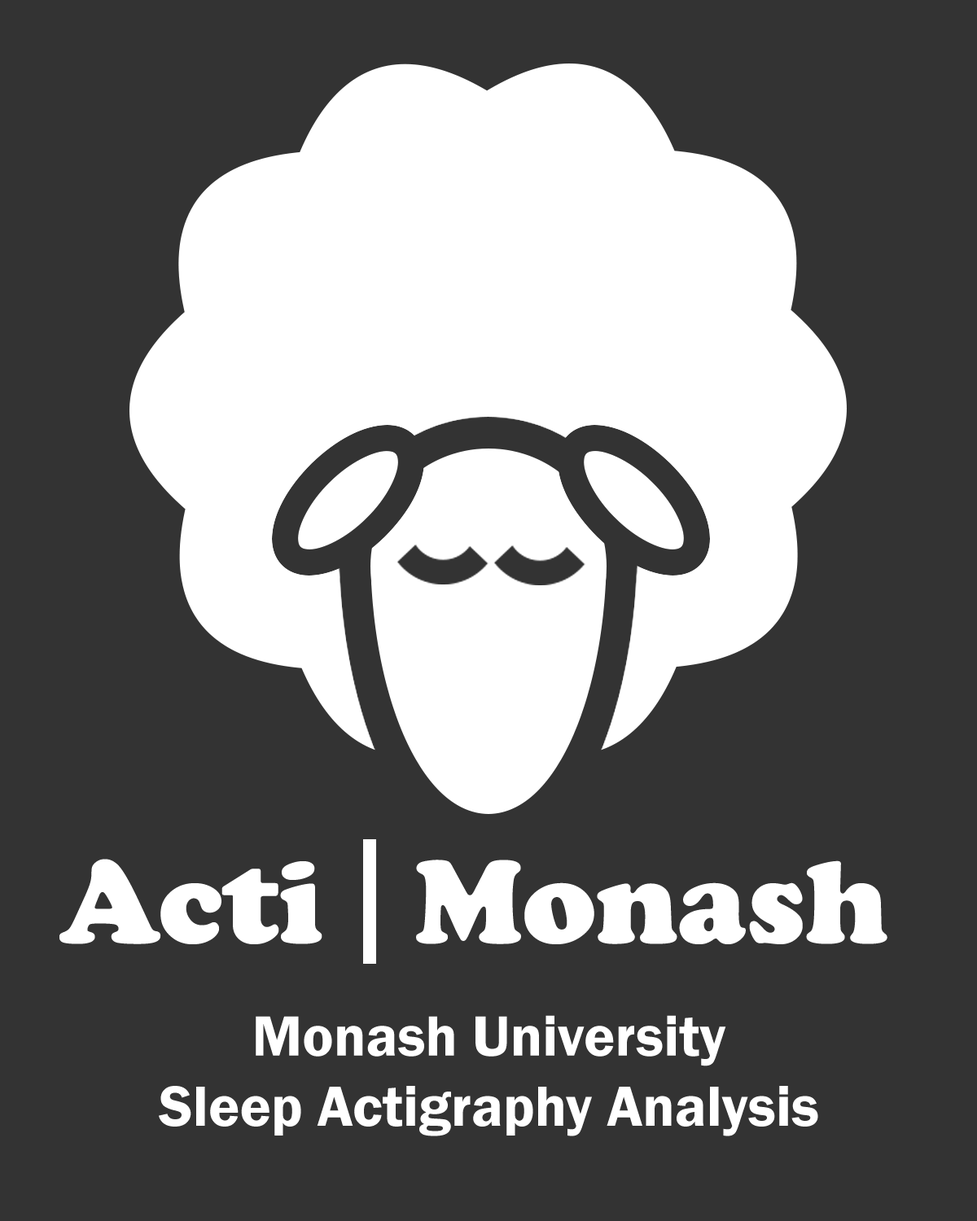
<style>
.page{position:relative;width:977px;height:1221px;background:#333333}
.page>*{position:absolute;margin:0}
.t1{font:122.1px "CooperBlack";color:#ffffff}
.t2{font:58.6px "FranklinGothic-Demi";color:#ffffff}
</style>
<div class="page">
<p class="t1" style="left:59px;top:859px;width:828px;height:85px">Acti   Monash</p>
<p class="t2" style="left:159px;top:1015px;width:659px;height:121px;text-align:center">Monash University<br>Sleep Actigraphy Analysis</p>
</div>
